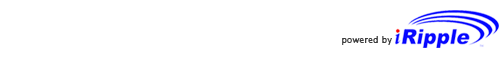
<style>
.page{position:relative;width:500px;height:75px;background:#ffffff}
.page>*{position:absolute;margin:0}
.t1{font:9px "LucidaSans";color:#3e3e3e}
</style>
<div class="page">
<p class="t1" style="left:342px;top:36px;width:50px;height:9px">powered by</p>
</div>
